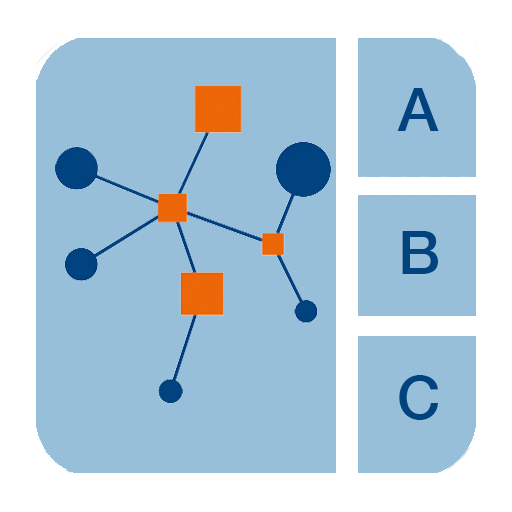
<style>
.page{position:relative;width:512px;height:512px;background:#97bfd9}
.page>*{position:absolute;margin:0}
.t1{font:60px "HelveticaNeue-Medium";color:#00437f}
</style>
<div class="page">
<p class="t1" style="left:397px;top:88px;width:42px;height:43px">A</p>
<p class="t1" style="left:402px;top:231px;width:36px;height:43px">B</p>
<p class="t1" style="left:399px;top:375px;width:39px;height:45px">C</p>
</div>
